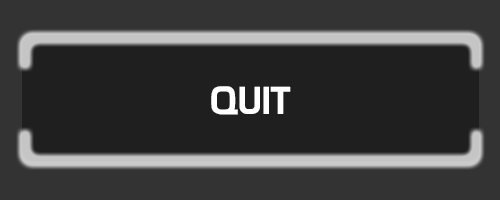
<style>
.page{position:relative;width:500px;height:200px;background:#1f1f1f}
.page>*{position:absolute;margin:0}
.t1{font:38px "Prototype";color:#ffffff}
</style>
<div class="page">
<p class="t1" style="left:211px;top:86px;width:80px;height:29px">QUIT</p>
</div>
